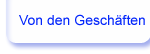
<style>
.page{position:relative;width:150px;height:54px;background:#fefefe}
.page>*{position:absolute;margin:0}
.t1{font:14px "ArialMT";color:#0326fb}
</style>
<div class="page">
<p class="t1" style="left:19px;top:14px;width:126px;height:12px">Von den Geschäften</p>
</div>
